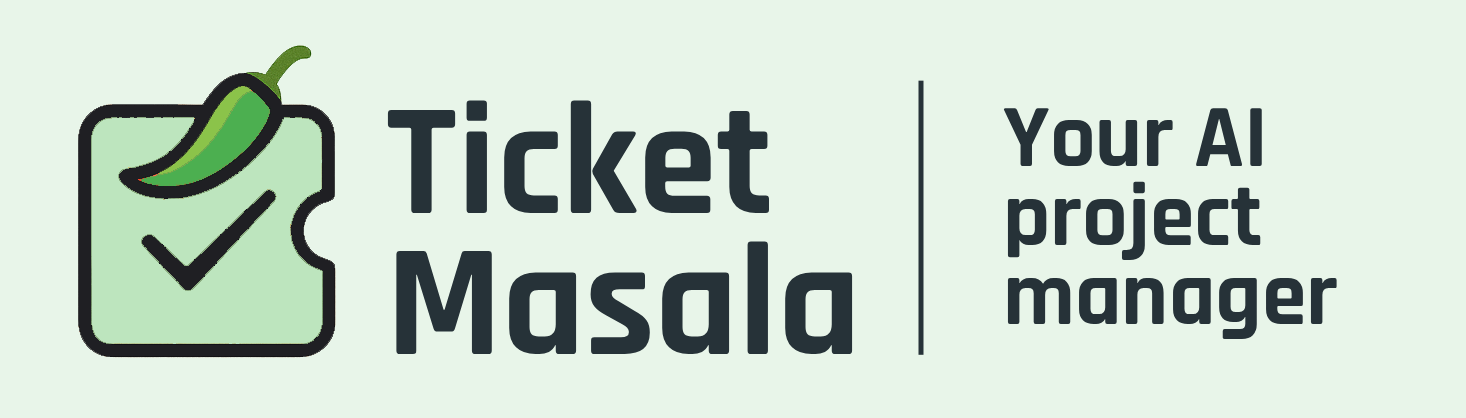
<style>
.page{position:relative;width:1466px;height:418px;background:#e8f5e9}
.page>*{position:absolute;margin:0}
.t1{font:160px "Rajdhani-Bold";color:#263238}
.t2{font:90px "Rajdhani-Bold";color:#263238}
</style>
<div class="page">
<p class="t1" style="left:387px;top:100px;width:466px;height:254px">Ticket<br>Masala</p>
<p class="t2" style="left:1003px;top:108px;width:334px;height:231px">Your AI <br>project <br>manager</p>
</div>
